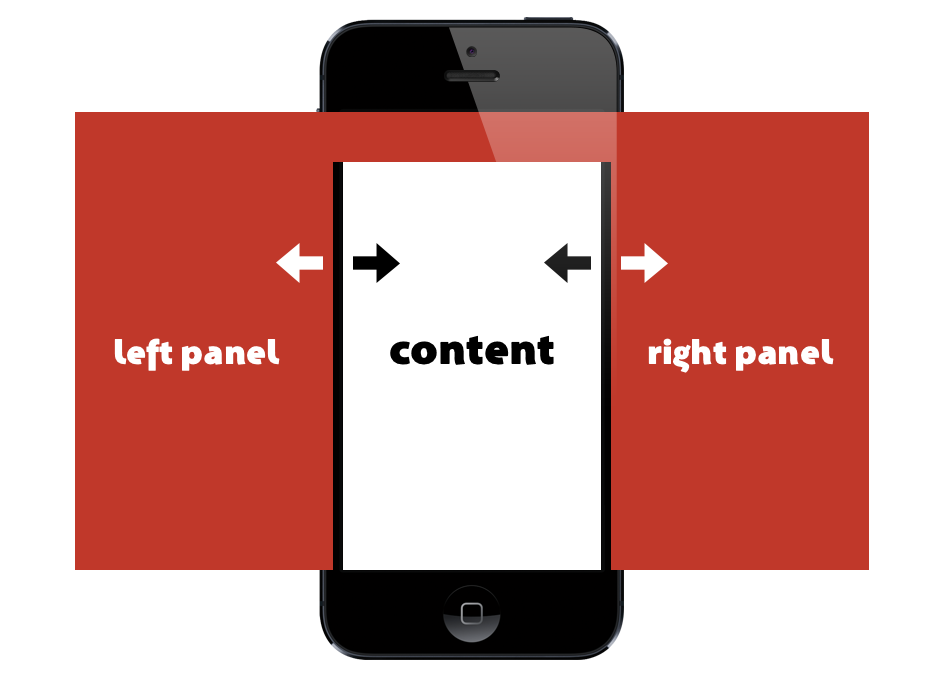
<style>
.page{position:relative;width:938px;height:675px;background:#ffffff}
.page>*{position:absolute;margin:0}
.t1{font:35px "Santana-Black";color:#ffffff}
.t2{font:44.2px "Santana-Black";color:#000000}
</style>
<div class="page">
<p class="t1" style="left:114px;top:338px;width:166px;height:33px">left panel</p>
<p class="t2" style="left:390px;top:335px;width:164px;height:30px">content</p>
<p class="t1" style="left:648px;top:338px;width:186px;height:35px">right panel</p>
</div>
